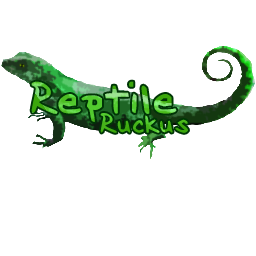
<style>
.page{position:relative;width:256px;height:256px;background:#ffffff}
.page>*{position:absolute;margin:0}
.t1{font:48px "Scott"}
.t2{font:30px "Scott";color:#3ba70b}
</style>
<div class="page">
<p class="t1" style="left:31px;top:81px;width:146px;height:41px">Reptile</p>
<p class="t2" style="left:100px;top:113px;width:88px;height:20px">Ruckus</p>
</div>
